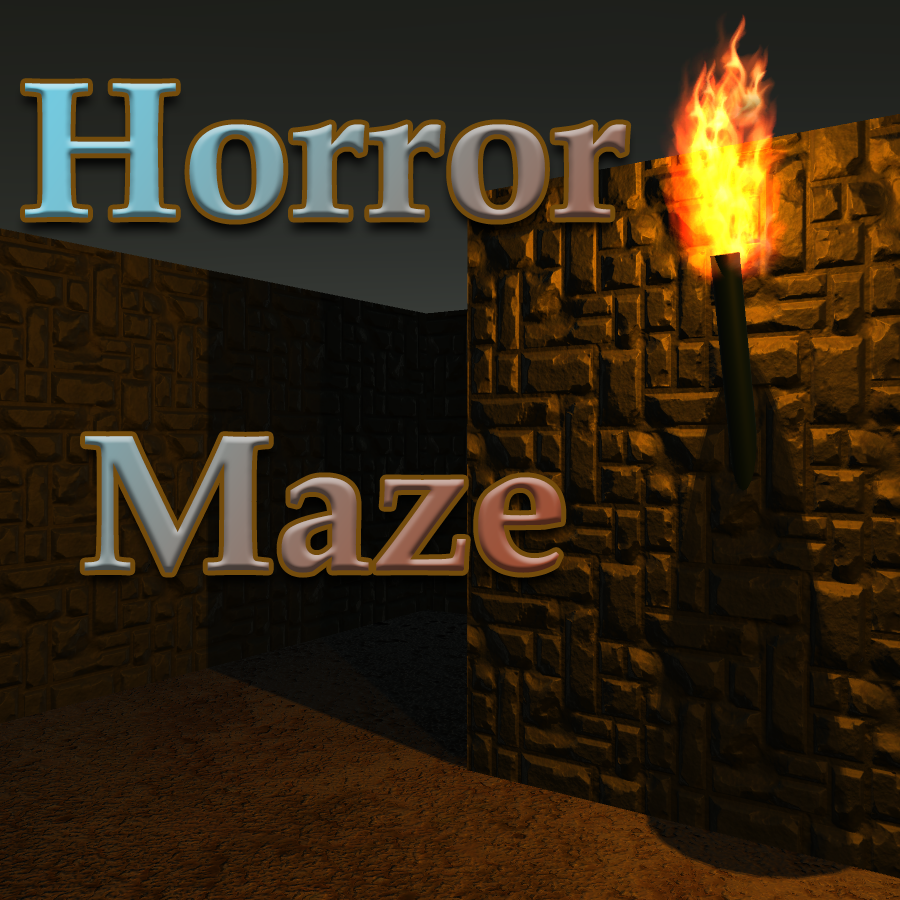
<style>
.page{position:relative;width:900px;height:900px}
.page>*{position:absolute;margin:0}
.t1{font:196px/329.4px "BookAntiqua-Bold"}
</style>
<div class="page">
<p class="t1" style="left:25px;top:83px;width:602px;height:490px;text-align:center">Horror<br>Maze</p>
</div>
